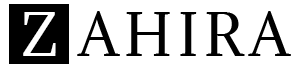
<style>
.page{position:relative;width:300px;height:68px;background:#ffffff}
.page>*{position:absolute;margin:0}
.t1{font:55px "Adamina-Regular";color:#ffffff}
.t2{font:55px "Adamina-Regular";letter-spacing:0.1em;color:#000000}
</style>
<div class="page">
<p class="t1" style="left:23px;top:12px;width:33px;height:44px">Z</p>
<p class="t2" style="left:77px;top:11px;width:214px;height:45px">AHIRA</p>
</div>
